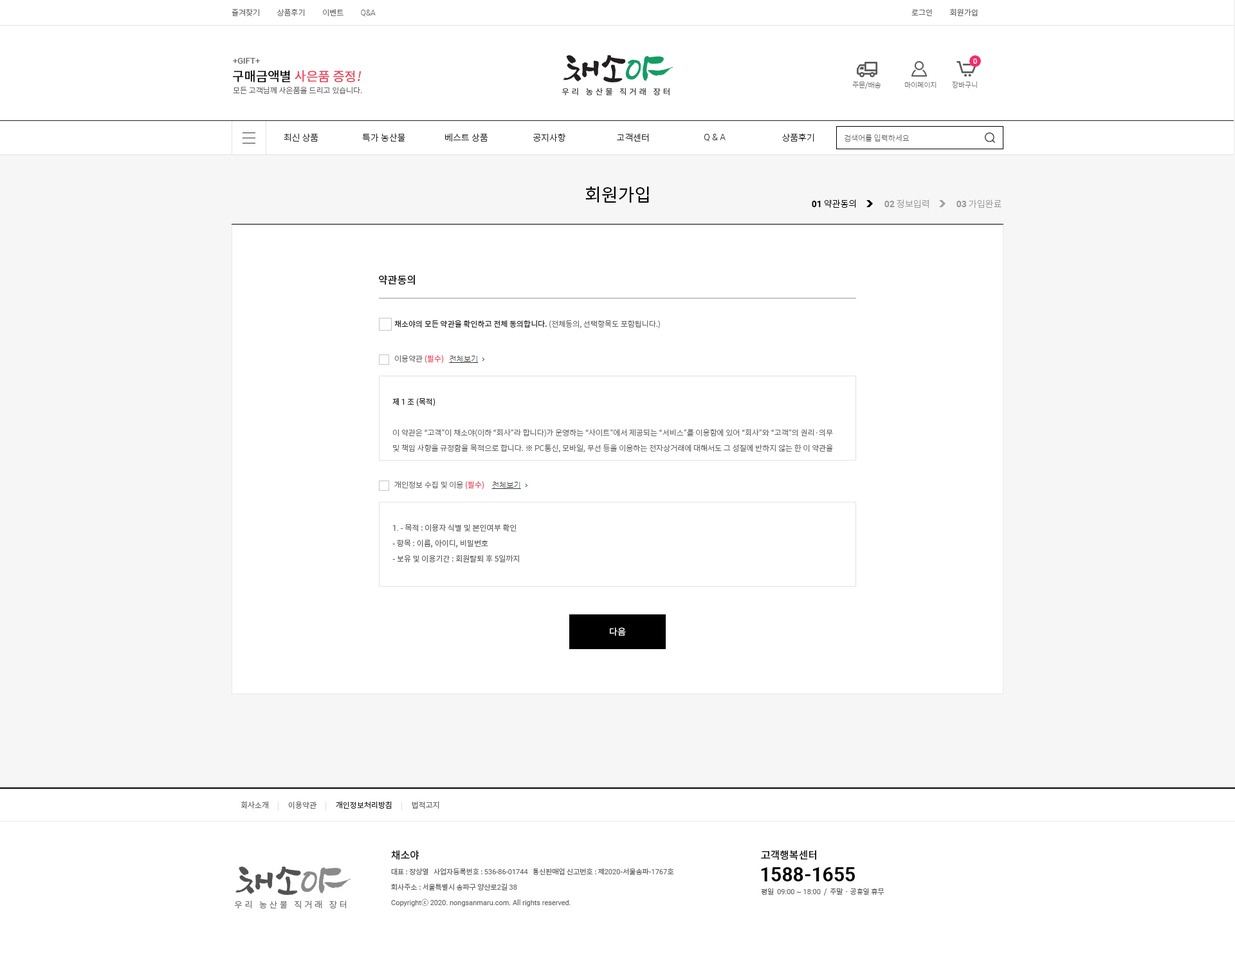
<style>
.page{position:relative;width:1235px;height:965px;background:#ffffff}
.page>*{position:absolute;margin:0}
.t1{font:7.7px "NotoSansCJKkr-Light";color:#666666}
.t2{font:7.7px "Roboto-Light";color:#666666}
.t3{font:7.7px "NotoSansCJKkr-DemiLight";color:#666666}
.t4{font:8.4px "Roboto-Medium";color:#666666}
.t5{font:12.9px "NotoSansCJKkr-Medium";color:#ea475c}
.t6{font:12.9px "NotoSansCJKkr-Medium";color:#000000}
.t7{font:12.9px "NotoSansCJKkr-Medium";color:#ea475c;font-style:italic}
.t8{font:7.1px "NotoSansCJKkr-Thin";color:#666666}
.t9{font:9px "NotoSansCJKkr-Light";color:#222222}
.t10{font:9px "Roboto-Light";color:#222222}
.t11{font:7.7px "NotoSansCJKkr-Thin";color:#666666}
.t12{font:18px "NotoSansCJKkr-Regular";color:#000000}
.t13{font:9px "NotoSansCJKkr-Light";color:#000000}
.t14{font:9px "Roboto-Bold";color:#000000}
.t15{font:9px "NotoSansCJKkr-Light";color:#999999}
.t16{font:9px "Roboto-Bold";color:#999999}
.t17{font:10.3px "NotoSansCJKkr-Medium";color:#222222}
.t18{font:7.7px "NotoSansCJKkr-Regular";color:#222222}
.t19{font:7.7px "NotoSansCJKkr-Regular";color:#ea475c}
.t20{font:7.7px/15.4px "NotoSansCJKkr-Light";color:#666666}
.t21{font:7.7px/15.4px "NotoSansCJKkr-Regular";color:#222222}
.t22{font:7.7px/15.4px "Roboto-Regular";color:#222222}
.t23{font:7.7px/15.4px "NotoSansCJKkr-Regular";color:#666666}
.t24{font:7.7px/15.4px "Roboto-Regular";color:#666666}
.t25{font:9px "NotoSansCJKkr-DemiLight";color:#ffffff}
</style>
<div class="page">
<p class="t1" style="left:232px;top:8px;width:144px;height:9px">즐겨찾기          상품후기          이벤트          <span class="t2">Q&amp;A</span></p>
<p class="t3" style="left:912px;top:8px;width:66px;height:9px">로그인          회원가입</p>
<p class="t4" style="left:233px;top:58px;width:27px;height:6px">+GIFT+</p>
<p class="t5" style="left:233px;top:70px;width:129px;height:12px"><span class="t6">구매금액별 </span>사은품 증정<span class="t7">!</span></p>
<p class="t1" style="left:233px;top:86px;width:129px;height:8px">모든 고객님께 사은품을 드리고 있습니다.</p>
<p class="t8" style="left:853px;top:81px;width:29px;height:8px">주문/배송</p>
<p class="t8" style="left:905px;top:82px;width:32px;height:7px">마이페이지</p>
<p class="t8" style="left:952px;top:81px;width:25px;height:8px">장바구니</p>
<p class="t9" style="left:284px;top:133px;width:35px;height:9px">최신 상품</p>
<p class="t9" style="left:362px;top:133px;width:43px;height:9px">특가 농산물</p>
<p class="t9" style="left:445px;top:133px;width:43px;height:9px">베스트 상품</p>
<p class="t9" style="left:533px;top:133px;width:33px;height:9px">공지사항</p>
<p class="t9" style="left:617px;top:133px;width:32px;height:9px">고객센터</p>
<p class="t10" style="left:705px;top:134px;width:21px;height:8px">Q &amp; A</p>
<p class="t9" style="left:782px;top:133px;width:33px;height:9px">상품후기</p>
<p class="t11" style="left:844px;top:134px;width:66px;height:8px">검색어를 입력하세요</p>
<p class="t12" style="left:586px;top:186px;width:63px;height:17px">회원가입</p>
<p class="t13" style="left:812px;top:199px;width:44px;height:9px"><span class="t14">01</span> 약관동의</p>
<p class="t15" style="left:885px;top:199px;width:44px;height:9px"><span class="t16">02</span> 정보입력</p>
<p class="t15" style="left:957px;top:199px;width:45px;height:9px"><span class="t16">03</span> 가입완료</p>
<p class="t17" style="left:379px;top:275px;width:36px;height:10px">약관동의</p>
<p class="t18" style="left:394px;top:320px;width:266px;height:9px">채소야의 모든 약관을 확인하고 전체 동의합니다. <span class="t1">(전체동의, 선택항목도 포함됩니다.)</span></p>
<p class="t1" style="left:394px;top:355px;width:50px;height:9px">이용약관 <span class="t19">(필수)</span></p>
<p class="t20" style="left:393px;top:398px;width:440px;height:54px"><span class="t21">제 </span><span class="t22">1</span><span class="t21"> 조 (목적)<br><br></span>이 약관은 “고객”이 채소야(이하 “회사”라 합니다)가 운영하는 “사이트”에서 제공되는 “서비스”를 이용함에 있어 “회사”와 “고객”의 권리·의무 <br>및 책임 사항을 규정함을 목적으로 합니다. ※ PC통신, 모바일, 무선 등을 이용하는 전자상거래에 대해서도 그 성질에 반하지 않는 한 이 약관을</p>
<p class="t1" style="left:394px;top:481px;width:91px;height:9px">개인정보 수집 및 이용 <span class="t19">(필수)</span></p>
<p class="t23" style="left:393px;top:524px;width:126px;height:39px"><span class="t20"><br></span><span class="t24">1.</span> - 목적 : 이용자 식별 및 본인여부 확인<br>- 항목 : 이름, 아이디, 비밀번호<br>- 보유 및 이용기간 : 회원탈퇴 후 5일까지</p>
<p class="t25" style="left:610px;top:627px;width:16px;height:9px">다음</p>
</div>
